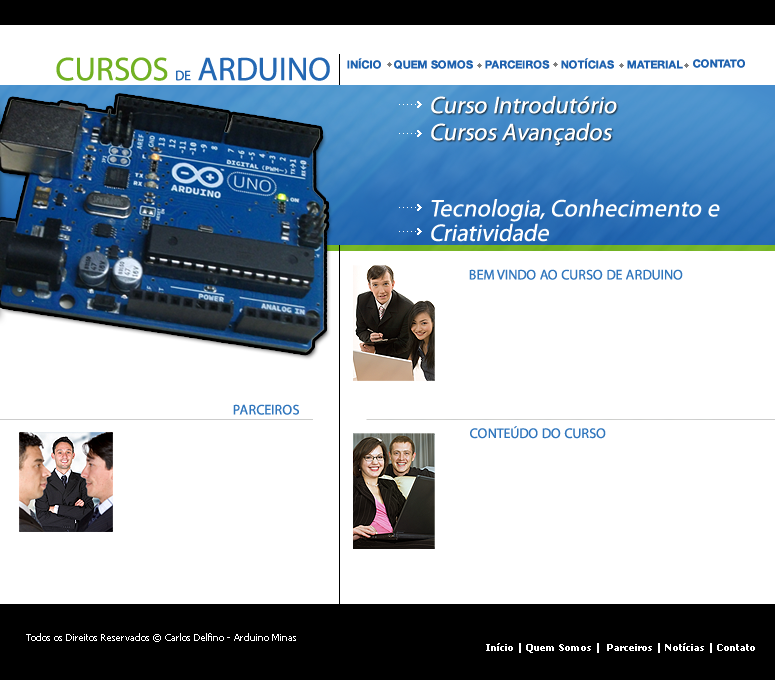
<style>
.page{position:relative;width:775px;height:680px;background:#ffffff}
.page>*{position:absolute;margin:0}
.t1{font:33px "MyriadPro-Regular";color:#2468b3;text-transform:uppercase}
.t2{font:33px "MyriadPro-Regular";color:#72b123;text-transform:uppercase}
.t3{font:14px "MyriadPro-Regular";color:#2468b3;text-transform:uppercase}
.t4{font:11px "HelveticaNeueLTStd-Bd";color:#1f62af;text-transform:uppercase}
.t5{font:24px "MyriadPro-Regular";color:#ffffff;font-style:italic}
.t6{font:24px/24.6px "MyriadPro-Regular";color:#ffffff;font-style:italic}
.t7{font:14px "MyriadPro-Regular";color:#3076bd;text-transform:uppercase}
.t8{font:10px "Tahoma";color:#ffffff}
.t9{font:10px "Tahoma-Bold";color:#ffffff}
</style>
<div class="page">
<p class="t1" style="left:56px;top:57px;width:274px;height:24px"><span class="t2">Cursos </span><span class="t3">de</span> Arduino</p>
<p class="t4" style="left:347px;top:58px;width:34px;height:11px">Início</p>
<p class="t4" style="left:394px;top:60px;width:79px;height:10px">Quem Somos</p>
<p class="t4" style="left:485px;top:60px;width:65px;height:9px">Parceiros</p>
<p class="t4" style="left:561px;top:58px;width:53px;height:11px">Notícias</p>
<p class="t4" style="left:627px;top:60px;width:56px;height:9px">Material</p>
<p class="t4" style="left:693px;top:59px;width:52px;height:9px">Contato</p>
<p class="t5" style="left:431px;top:96px;width:186px;height:18px">Curso Introdutório</p>
<p class="t5" style="left:431px;top:123px;width:181px;height:23px">Cursos Avançados</p>
<p class="t6" style="left:431px;top:199px;width:289px;height:43px">Tecnologia, Conhecimento e<br>Criatividade</p>
<p class="t7" style="left:469px;top:269px;width:214px;height:11px">Bem Vindo ao Curso de Arduino</p>
<p class="t7" style="left:233px;top:404px;width:66px;height:11px">Parceiros</p>
<p class="t7" style="left:470px;top:426px;width:136px;height:13px">Conteúdo do Curso</p>
<p class="t8" style="left:26px;top:633px;width:270px;height:9px">Todos os Direitos Reservados © Carlos Delfino - Arduino Minas</p>
<p class="t9" style="left:486px;top:643px;width:269px;height:10px">Início | Quem Somos |  Parceiros | Notícias | Contato</p>
</div>
